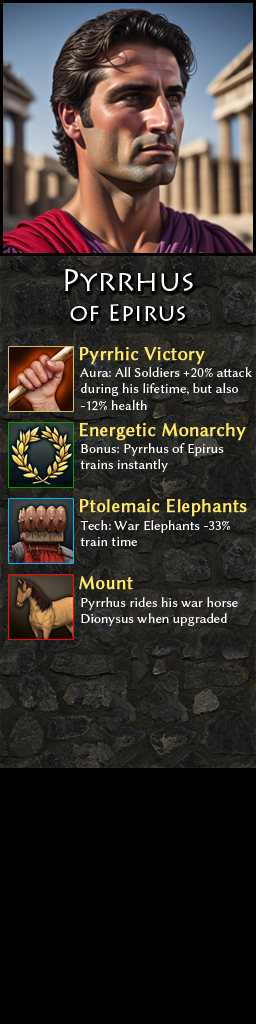
<style>
.page{position:relative;width:256px;height:1024px;background:#000000}
.page>*{position:absolute;margin:0}
.t1{font:24px/30px "LithosPro-Regular";color:#ffffff}
.t2{font:30px/30px "LithosPro-Regular";color:#ffffff}
.t3{font:19px "LinBiolinumO";color:#ffe963;font-weight:bold}
.t4{font:14px "LinBiolinumO";color:#ffffff}
</style>
<div class="page">
<p class="t1" style="left:65px;top:269px;width:128px;height:52px;text-align:center"><span class="t2">Pyrrhus<br></span>of Epirus</p>
<p class="t3" style="left:79px;top:347px;width:126px;height:18px">Pyrrhic Victory</p>
<p class="t4" style="left:80px;top:367px;width:172px;height:43px">Aura: All Soldiers +20% attack<br>during his lifetime, but also <br>-12% health</p>
<p class="t3" style="left:79px;top:422px;width:167px;height:19px">Energetic Monarchy</p>
<p class="t4" style="left:80px;top:443px;width:144px;height:29px">Bonus: Pyrrhus of Epirus<br>trains instantly</p>
<p class="t3" style="left:79px;top:498px;width:168px;height:19px">Ptolemaic Elephants</p>
<p class="t4" style="left:80px;top:520px;width:150px;height:26px">Tech: War Elephants -33%<br>train time</p>
<p class="t3" style="left:79px;top:576px;width:54px;height:14px">Mount</p>
<p class="t4" style="left:81px;top:597px;width:157px;height:29px">Pyrrhus rides his war horse<br>Dionysus when upgraded</p>
</div>
